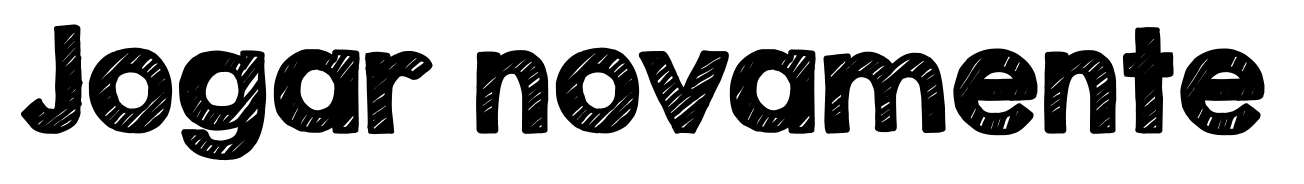
<style>
.page{position:relative;width:1304px;height:184px;background:#ffffff}
.page>*{position:absolute;margin:0}
.t1{font:125px "KGSecondChancesSketch";color:#000000;font-weight:bold}
</style>
<div class="page">
<p class="t1" style="left:21px;top:24px;width:1244px;height:137px">Jogar novamente</p>
</div>
